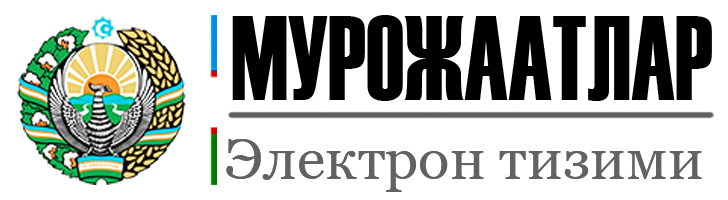
<style>
.page{position:relative;width:728px;height:200px;background:#ffffff}
.page>*{position:absolute;margin:0}
.t1{font:120px "Haettenschweiler";color:#000000;scale:0.83 1}
.t2{font:58.3px "Georgia";color:#5d5d5d}
</style>
<div class="page">
<p class="t1" style="left:232px;top:15px;width:480px;height:86px">МУРОЖААТЛАР</p>
<p class="t2" style="left:226px;top:139px;width:476px;height:53px;opacity:0.97">Электрон тизими</p>
</div>
